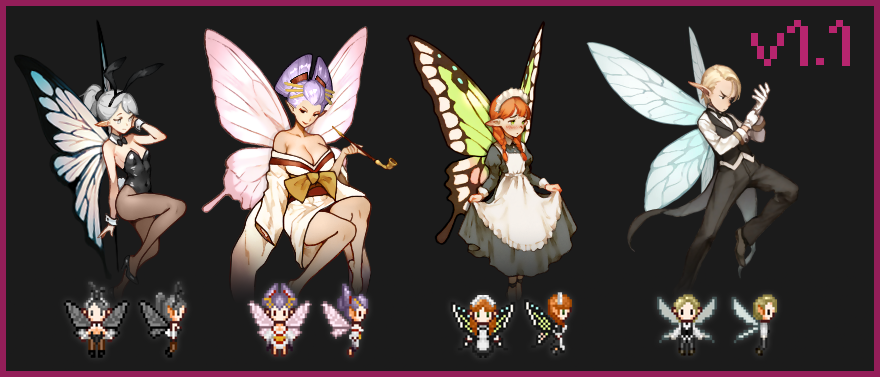
<style>
.page{position:relative;width:880px;height:377px;background:#1b1b1b}
.page>*{position:absolute;margin:0}
.t1{font:72px "PixelifySans-Regular";color:#b7256e}
</style>
<div class="page">
<p class="t1" style="left:751px;top:20px;width:99px;height:46px">v1.1</p>
</div>
